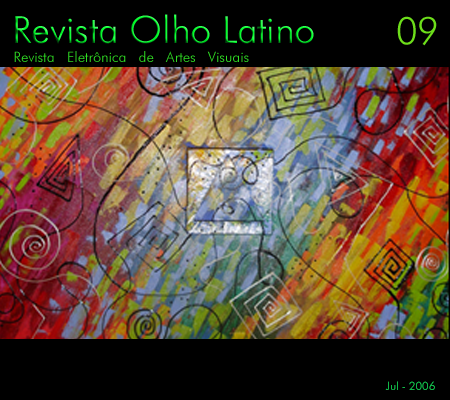
<style>
.page{position:relative;width:450px;height:400px;background:#000000}
.page>*{position:absolute;margin:0}
.t1{font:37.5px "FuturaBT-Light"}
.t2{font:37.5px "FuturaBT-Light";color:#6dde1a}
.t3{font:14.4px "FuturaBT-Light";color:#30df23}
.t4{font:11.4px "FuturaBT-Light";color:#11b748}
</style>
<div class="page">
<p class="t1" style="left:15px;top:14px;width:299px;height:30px">Revista Olho Latino</p>
<p class="t2" style="left:397px;top:16px;width:40px;height:30px">09</p>
<p class="t3" style="left:14px;top:51px;width:235px;height:11px">Revista   Eletrônica   de   Artes   Visuais</p>
<p class="t4" style="left:385px;top:381px;width:50px;height:9px">Jul - 2006</p>
</div>
